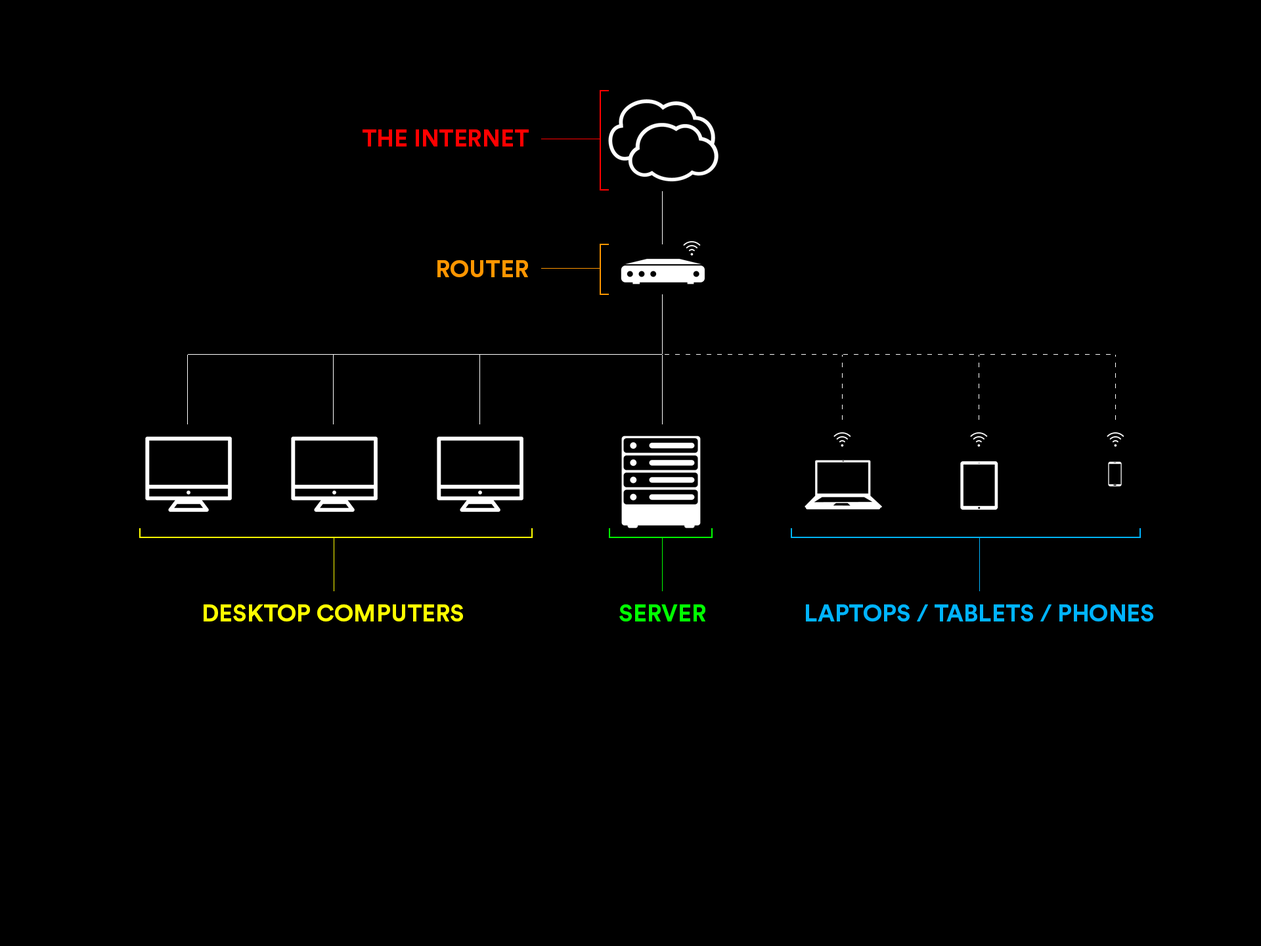
<style>
.page{position:relative;width:1261px;height:946px;background:#000000}
.page>*{position:absolute;margin:0}
.t1{font:23.6px "CircularStd-Bold";color:#ff0000;text-transform:uppercase}
.t2{font:23.6px "CircularStd-Bold";color:#ff9600;text-transform:uppercase}
.t3{font:23.6px "CircularStd-Bold";color:#ffff00;text-transform:uppercase}
.t4{font:23.6px "CircularStd-Bold";color:#00ff00;text-transform:uppercase}
.t5{font:23.6px "CircularStd-Bold";color:#00b4ff;text-transform:uppercase}
</style>
<div class="page">
<p class="t1" style="left:363px;top:129px;width:166px;height:17px">The Internet</p>
<p class="t2" style="left:437px;top:260px;width:91px;height:17px">Router</p>
<p class="t3" style="left:204px;top:604px;width:259px;height:17px">desktop computers</p>
<p class="t4" style="left:619px;top:604px;width:86px;height:17px">Server</p>
<p class="t5" style="left:806px;top:604px;width:347px;height:17px">LAPTOPS / tablets / phones</p>
</div>
